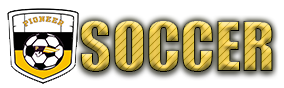
<style>
.page{position:relative;width:284px;height:88px;background:#ffffff}
.page>*{position:absolute;margin:0}
.t1{font:62.5px "Impact"}
</style>
<div class="page">
<p class="t1" style="left:80px;top:20px;width:193px;height:52px">SOCCER</p>
</div>
